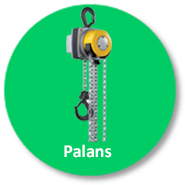
<style>
.page{position:relative;width:185px;height:185px;background:#00cc66}
.page>*{position:absolute;margin:0}
.t1{font:18px "Calibri-Bold";color:#ffffff}
</style>
<div class="page">
<p class="t1" style="left:64px;top:144px;width:48px;height:14px">Palans</p>
</div>
